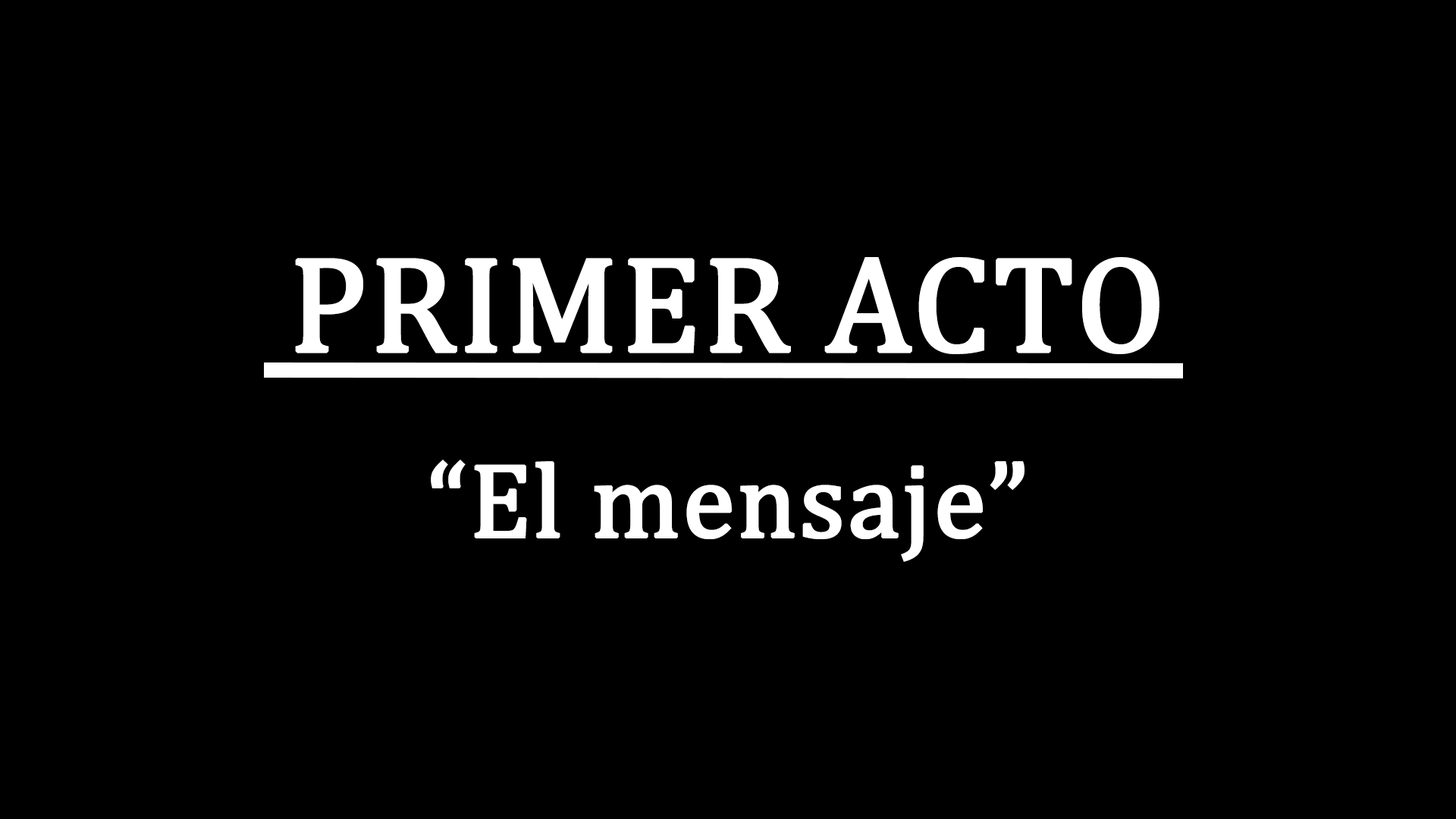
<style>
.page{position:relative;width:1456px;height:819px;background:#000000}
.page>*{position:absolute;margin:0}
.t1{font:136.5px "Cambria";color:#ffffff;font-weight:bold}
.t2{font:106.2px "Cambria";color:#ffffff;font-weight:bold}
</style>
<div class="page">
<p class="t1" style="left:295px;top:257px;width:864px;height:97px">PRIMER ACTO</p>
<p class="t2" style="left:431px;top:460px;width:593px;height:102px">“El mensaje”</p>
</div>
